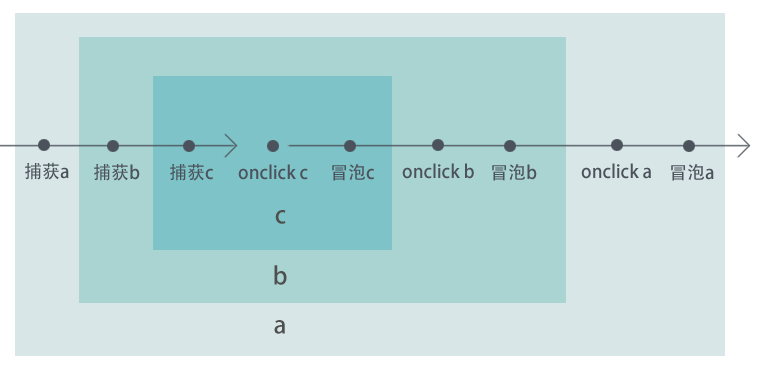
<style>
.page{position:relative;width:770px;height:367px;background:#d8e6e7}
.page>*{position:absolute;margin:0}
.t1{font:18px "AdobeHeitiStd-Regular";color:#4b525b}
.t2{font:24px "AdobeHeitiStd-Regular";color:#4f4f4f}
</style>
<div class="page">
<p class="t1" style="left:25px;top:162px;width:44px;height:18px">捕获a</p>
<p class="t1" style="left:94px;top:163px;width:46px;height:18px">捕获b</p>
<p class="t1" style="left:170px;top:163px;width:43px;height:18px">捕获c</p>
<p class="t1" style="left:238px;top:164px;width:70px;height:16px">onclick c</p>
<p class="t1" style="left:332px;top:164px;width:42px;height:17px">冒泡c</p>
<p class="t1" style="left:402px;top:163px;width:72px;height:16px">onclick b</p>
<p class="t1" style="left:492px;top:164px;width:45px;height:17px">冒泡b</p>
<p class="t1" style="left:581px;top:163px;width:70px;height:16px">onclick a</p>
<p class="t1" style="left:671px;top:164px;width:43px;height:17px">冒泡a</p>
<p class="t2" style="left:275px;top:210px;width:11px;height:14px">c</p>
<p class="t2" style="left:274px;top:265px;width:13px;height:20px">b</p>
<p class="t2" style="left:274px;top:320px;width:11px;height:14px">a</p>
</div>
